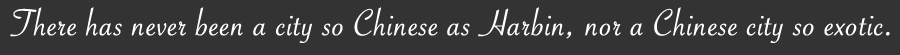
<style>
.page{position:relative;width:900px;height:55px;background:#333333}
.page>*{position:absolute;margin:0}
.t1{font:40px "SavoyeLetPlain";color:#ffffff;font-weight:bold}
</style>
<div class="page">
<p class="t1" style="left:10px;top:7px;width:880px;height:36px">There has never been a city so Chinese as Harbin, nor a Chinese city so exotic.</p>
</div>
